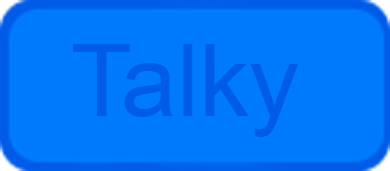
<style>
.page{position:relative;width:390px;height:171px;background:#007afc}
.page>*{position:absolute;margin:0}
.t1{font:100px "ArialMT";color:#005ce7}
</style>
<div class="page">
<p class="t1" style="left:73px;top:44px;width:225px;height:93px">Talky</p>
</div>
